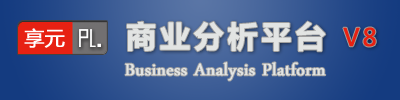
<style>
.page{position:relative;width:400px;height:100px}
.page>*{position:absolute;margin:0}
.t1{font:30px "MicrosoftYaHei-Bold";letter-spacing:0.1em;color:#e2e4e3;font-weight:bold}
.t2{font:24px "MicrosoftYaHei";letter-spacing:0.1em;color:#e72112;font-weight:bold}
.t3{font:24px "DaunPenh";color:#e2e4e3;font-weight:bold}
</style>
<div class="page">
<p class="t1" style="left:127px;top:21px;width:199px;height:31px">商业分析平台</p>
<p class="t2" style="left:343px;top:27px;width:33px;height:20px">V8</p>
<p class="t3" style="left:125px;top:62px;width:201px;height:19px">Business Analysis Platform</p>
</div>
